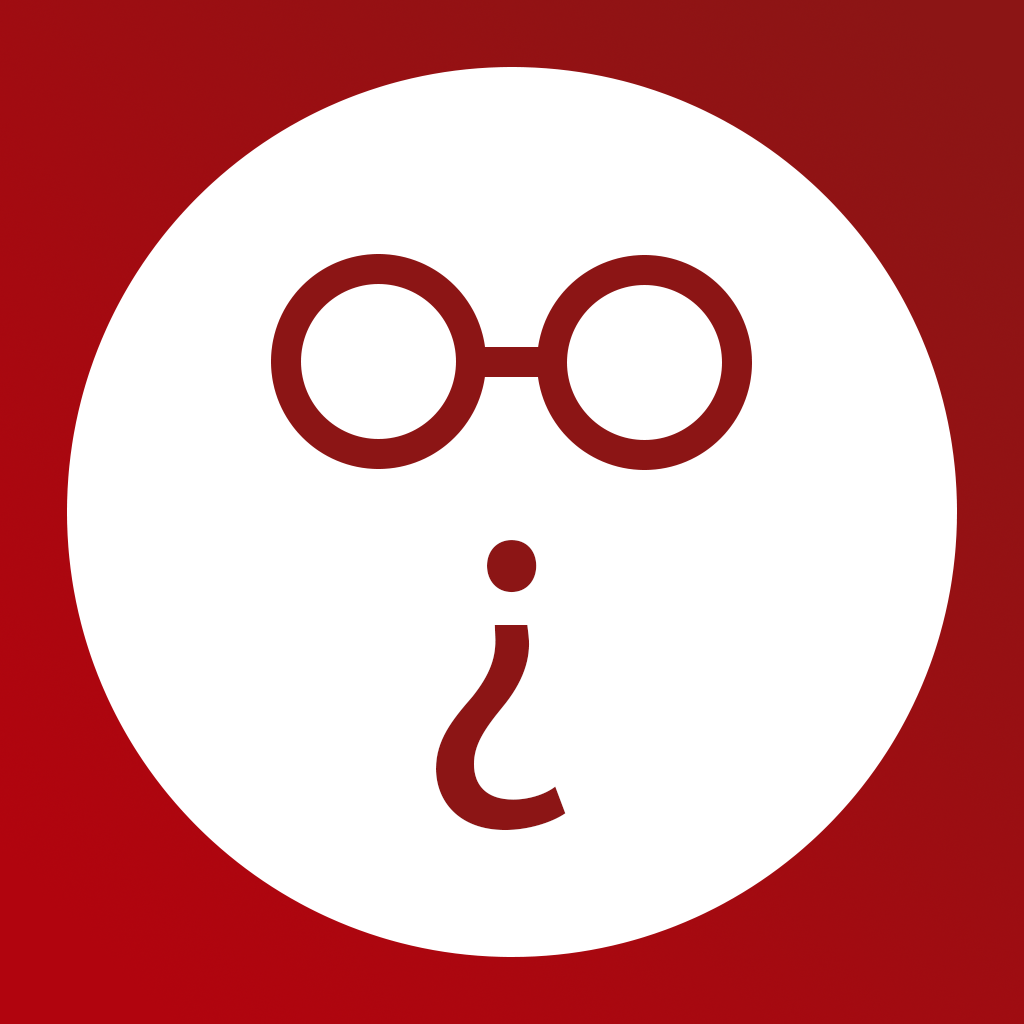
<style>
.page{position:relative;width:1024px;height:1024px;background:#ffffff}
.page>*{position:absolute;margin:0}
.t1{font:416.7px "MyriadPro-Regular";color:#8c1515}
</style>
<div class="page">
<p class="t1" style="left:436px;top:540px;width:130px;height:291px">¿</p>
</div>
